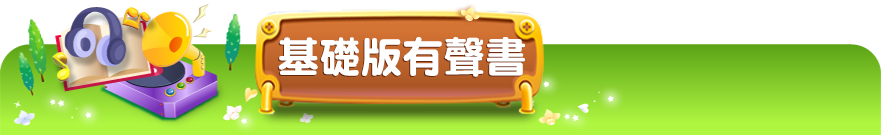
<style>
.page{position:relative;width:881px;height:135px;background:#ffffff}
.page>*{position:absolute;margin:0}
.t1{font:42.4px "DFNYuan-W9-WINP-BF";color:#ffffff}
</style>
<div class="page">
<p class="t1" style="left:278px;top:37px;width:247px;height:40px">基礎版有聲書</p>
</div>
